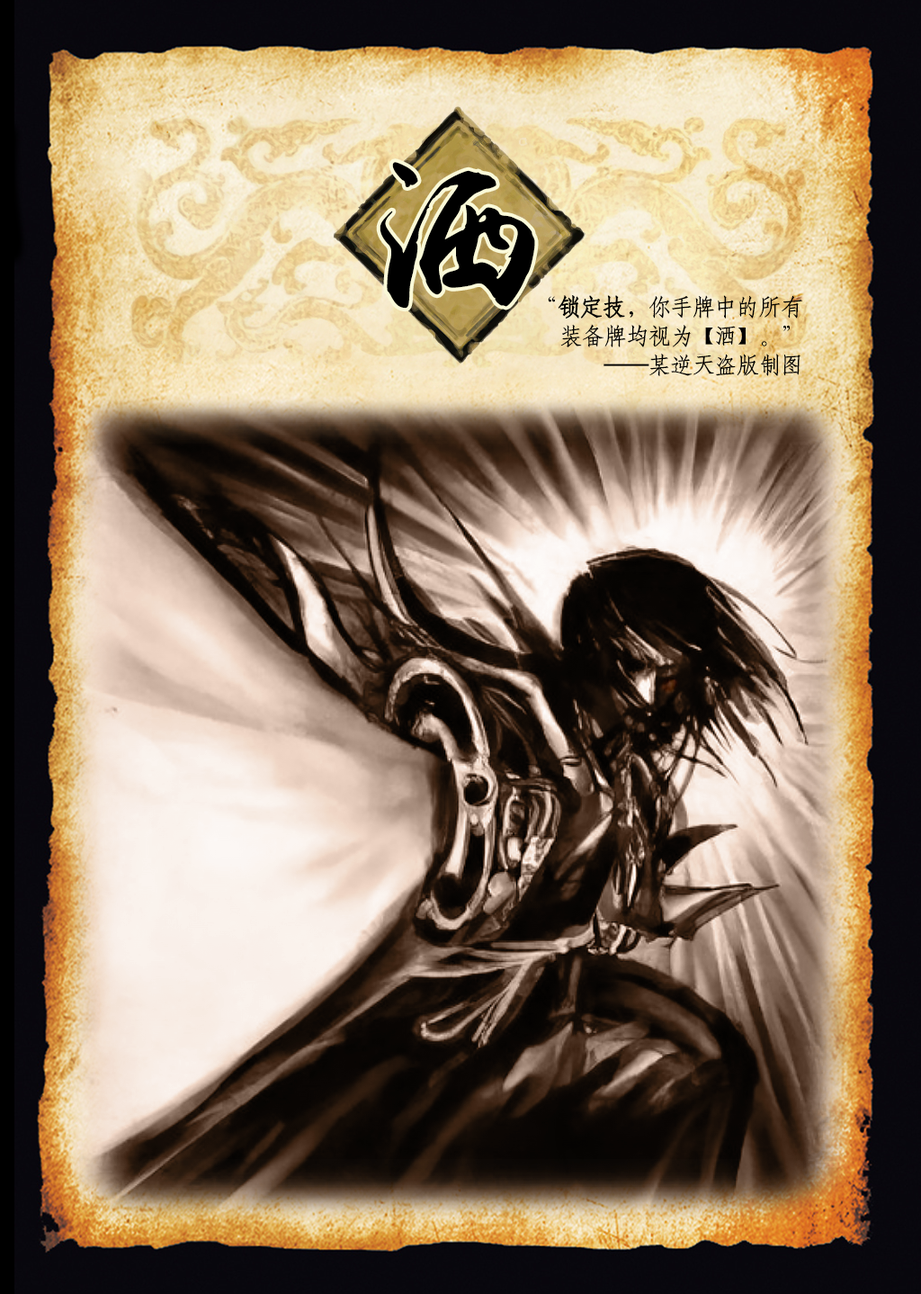
<style>
.page{position:relative;width:921px;height:1294px}
.page>*{position:absolute;margin:0}
.t1{font:210.2px "yuweij";letter-spacing:-0.05em;color:#000000}
.t2{font:23.2px/29.1px "HYd4gj";letter-spacing:-0.05em;color:#000000}
.t3{font:23.2px/29.1px "HYd4gj";letter-spacing:-0.05em;color:#000000;font-weight:bold}
</style>
<div class="page">
<p class="t1" style="left:380px;top:162px;width:155px;height:147px">洒</p>
<p class="t2" style="left:548px;top:295px;width:255px;height:81px;text-align:right">“<span class="t3">锁定技，</span>你手牌中的所有<br>装备牌均视为【洒】。”<br>——某逆天盗版制图</p>
</div>
